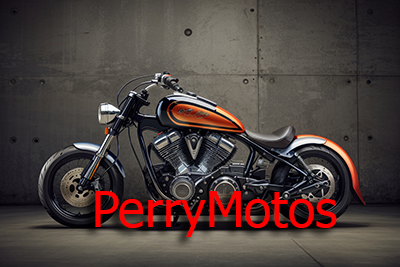
<style>
.page{position:relative;width:400px;height:267px}
.page>*{position:absolute;margin:0}
.t1{font:50px "Tahoma";color:#ff0000}
</style>
<div class="page">
<p class="t1" style="left:95px;top:191px;width:242px;height:46px">PerryMotos</p>
</div>
